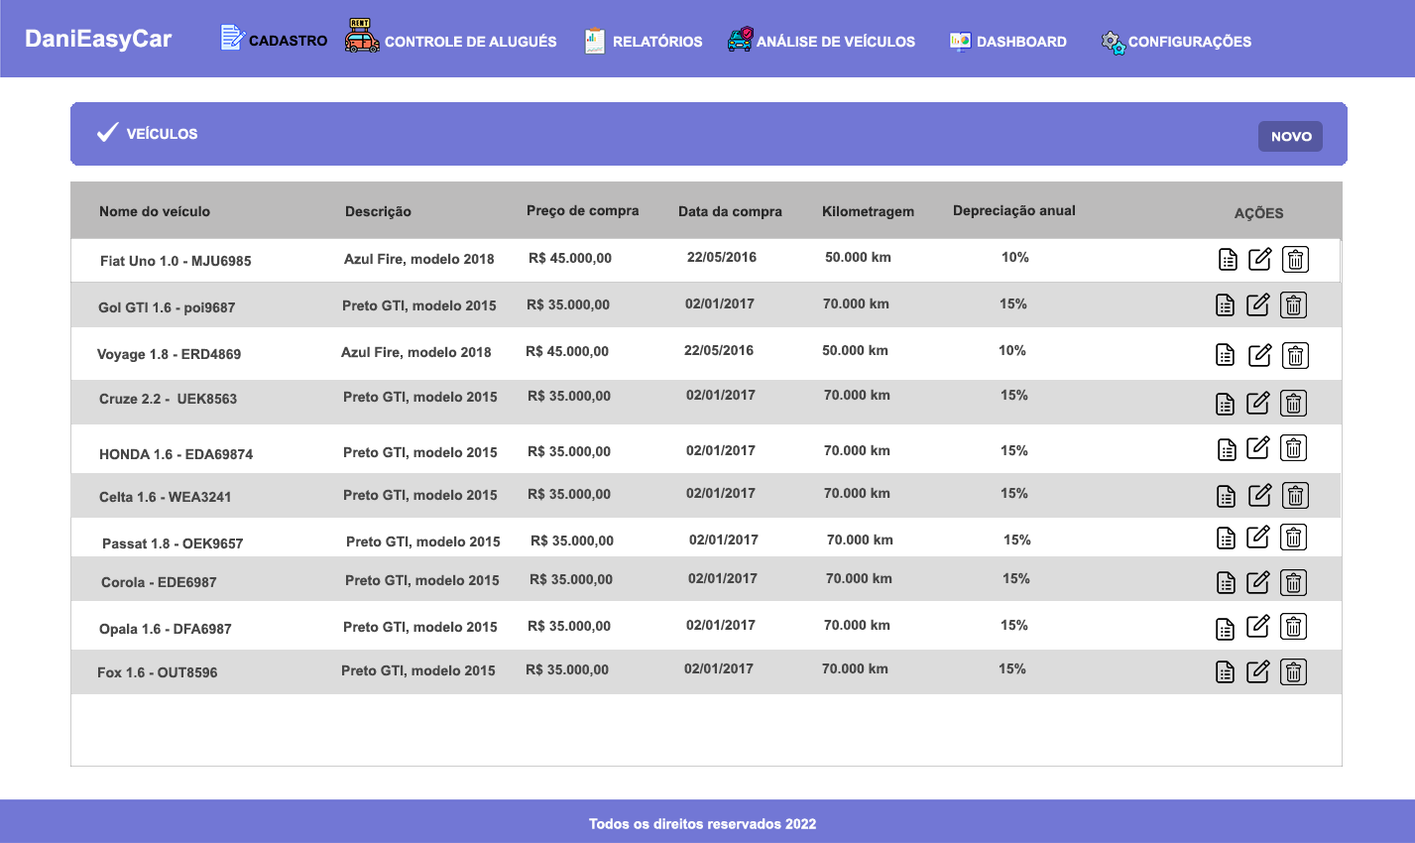
<style>
.page{position:relative;width:1415px;height:843px;background:#ffffff}
.page>*{position:absolute;margin:0}
.t1{font:23.8px "Arial-BoldMT";color:#fdfdfd}
.t2{font:13.9px "Arial-BoldMT";color:#010101}
.t3{font:13.9px "Arial-BoldMT";color:#fdfdfd}
.t4{font:13.9px "Arial-BoldMT";color:#fefefe}
.t5{font:12.1px "Arial-BoldMT";color:#fefefe;scale:1.15 1}
.t6{font:13.9px "Arial-BoldMT";color:#2a2a2a}
.t7{font:13.9px "Arial-BoldMT";color:#474747}
.t8{font:13.9px "Arial-BoldMT";color:#ffffff}
</style>
<div class="page">
<p class="t1" style="left:26px;top:29px;width:147px;height:24px">DaniEasyCar</p>
<p class="t2" style="left:249px;top:35px;width:78px;height:12px">CADASTRO</p>
<p class="t3" style="left:385px;top:34px;width:172px;height:14px">CONTROLE DE ALUGUÉS</p>
<p class="t3" style="left:614px;top:34px;width:89px;height:14px">RELATÓRIOS</p>
<p class="t3" style="left:757px;top:34px;width:158px;height:14px">ANÁLISE DE VEÍCULOS</p>
<p class="t3" style="left:978px;top:36px;width:89px;height:12px">DASHBOARD</p>
<p class="t3" style="left:1128px;top:34px;width:123px;height:16px">CONFIGURAÇÕES</p>
<p class="t4" style="left:126px;top:126px;width:71px;height:14px">VEÍCULOS</p>
<p class="t5" style="left:1272px;top:132px;width:40px;height:10px">NOVO</p>
<p class="t6" style="left:100px;top:205px;width:110px;height:12px">Nome do veículo</p>
<p class="t6" style="left:346px;top:205px;width:65px;height:14px">Descrição</p>
<p class="t6" style="left:527px;top:204px;width:113px;height:14px">Preço de compra</p>
<p class="t6" style="left:679px;top:205px;width:103px;height:14px">Data da compra</p>
<p class="t6" style="left:823px;top:205px;width:91px;height:14px">Kilometragem</p>
<p class="t6" style="left:954px;top:204px;width:121px;height:14px">Depreciação anual</p>
<p class="t7" style="left:1234px;top:205px;width:50px;height:16px">AÇÕES</p>
<p class="t7" style="left:101px;top:255px;width:151px;height:12px">Fiat Uno 1.0 - MJU6985</p>
<p class="t7" style="left:344px;top:253px;width:151px;height:14px">Azul Fire, modelo 2018</p>
<p class="t7" style="left:529px;top:252px;width:83px;height:14px">R$ 45.000,00</p>
<p class="t7" style="left:687px;top:251px;width:70px;height:12px">22/05/2016</p>
<p class="t7" style="left:825px;top:251px;width:66px;height:12px">50.000 km</p>
<p class="t7" style="left:1002px;top:251px;width:27px;height:12px">10%</p>
<p class="t7" style="left:98px;top:301px;width:137px;height:14px">Gol GTI 1.6 - poi9687</p>
<p class="t7" style="left:343px;top:299px;width:154px;height:14px">Preto GTI, modelo 2015</p>
<p class="t7" style="left:527px;top:298px;width:83px;height:14px">R$ 35.000,00</p>
<p class="t7" style="left:685px;top:297px;width:70px;height:12px">02/01/2017</p>
<p class="t7" style="left:823px;top:297px;width:66px;height:12px">70.000 km</p>
<p class="t7" style="left:1000px;top:297px;width:27px;height:12px">15%</p>
<p class="t7" style="left:96px;top:348px;width:145px;height:14px">Voyage 1.8 - ERD4869</p>
<p class="t7" style="left:341px;top:346px;width:151px;height:14px">Azul Fire, modelo 2018</p>
<p class="t7" style="left:526px;top:345px;width:83px;height:14px">R$ 45.000,00</p>
<p class="t7" style="left:684px;top:344px;width:70px;height:12px">22/05/2016</p>
<p class="t7" style="left:822px;top:344px;width:66px;height:12px">50.000 km</p>
<p class="t7" style="left:999px;top:344px;width:27px;height:12px">10%</p>
<p class="t7" style="left:528px;top:390px;width:83px;height:14px">R$ 35.000,00</p>
<p class="t7" style="left:686px;top:389px;width:70px;height:12px">02/01/2017</p>
<p class="t7" style="left:824px;top:389px;width:66px;height:12px">70.000 km</p>
<p class="t7" style="left:1001px;top:389px;width:27px;height:12px">15%</p>
<p class="t7" style="left:99px;top:393px;width:138px;height:12px">Cruze 2.2 -  UEK8563</p>
<p class="t7" style="left:344px;top:391px;width:154px;height:14px">Preto GTI, modelo 2015</p>
<p class="t7" style="left:100px;top:448px;width:153px;height:12px">HONDA 1.6 - EDA69874</p>
<p class="t7" style="left:344px;top:446px;width:154px;height:14px">Preto GTI, modelo 2015</p>
<p class="t7" style="left:528px;top:445px;width:83px;height:14px">R$ 35.000,00</p>
<p class="t7" style="left:686px;top:444px;width:70px;height:12px">02/01/2017</p>
<p class="t7" style="left:824px;top:444px;width:66px;height:12px">70.000 km</p>
<p class="t7" style="left:1001px;top:444px;width:27px;height:12px">15%</p>
<p class="t7" style="left:99px;top:491px;width:131px;height:12px">Celta 1.6 - WEA3241</p>
<p class="t7" style="left:344px;top:489px;width:154px;height:14px">Preto GTI, modelo 2015</p>
<p class="t7" style="left:528px;top:488px;width:83px;height:14px">R$ 35.000,00</p>
<p class="t7" style="left:686px;top:487px;width:70px;height:12px">02/01/2017</p>
<p class="t7" style="left:824px;top:487px;width:66px;height:12px">70.000 km</p>
<p class="t7" style="left:1001px;top:487px;width:27px;height:12px">15%</p>
<p class="t7" style="left:689px;top:533px;width:70px;height:12px">02/01/2017</p>
<p class="t7" style="left:827px;top:533px;width:66px;height:12px">70.000 km</p>
<p class="t7" style="left:1004px;top:533px;width:27px;height:12px">15%</p>
<p class="t7" style="left:103px;top:537px;width:140px;height:12px">Passat 1.8 - OEK9657</p>
<p class="t7" style="left:347px;top:535px;width:154px;height:14px">Preto GTI, modelo 2015</p>
<p class="t7" style="left:531px;top:534px;width:83px;height:14px">R$ 35.000,00</p>
<p class="t7" style="left:101px;top:576px;width:116px;height:12px">Corola - EDE6987</p>
<p class="t7" style="left:346px;top:574px;width:154px;height:14px">Preto GTI, modelo 2015</p>
<p class="t7" style="left:530px;top:573px;width:83px;height:14px">R$ 35.000,00</p>
<p class="t7" style="left:688px;top:572px;width:70px;height:12px">02/01/2017</p>
<p class="t7" style="left:826px;top:572px;width:66px;height:12px">70.000 km</p>
<p class="t7" style="left:1003px;top:572px;width:27px;height:12px">15%</p>
<p class="t7" style="left:99px;top:623px;width:133px;height:14px">Opala 1.6 - DFA6987</p>
<p class="t7" style="left:344px;top:621px;width:154px;height:14px">Preto GTI, modelo 2015</p>
<p class="t7" style="left:528px;top:620px;width:83px;height:14px">R$ 35.000,00</p>
<p class="t7" style="left:686px;top:619px;width:70px;height:12px">02/01/2017</p>
<p class="t7" style="left:824px;top:619px;width:66px;height:12px">70.000 km</p>
<p class="t7" style="left:1001px;top:619px;width:27px;height:12px">15%</p>
<p class="t7" style="left:342px;top:664px;width:154px;height:14px">Preto GTI, modelo 2015</p>
<p class="t7" style="left:526px;top:663px;width:83px;height:14px">R$ 35.000,00</p>
<p class="t7" style="left:684px;top:662px;width:70px;height:12px">02/01/2017</p>
<p class="t7" style="left:822px;top:662px;width:66px;height:12px">70.000 km</p>
<p class="t7" style="left:999px;top:662px;width:27px;height:12px">15%</p>
<p class="t7" style="left:98px;top:666px;width:119px;height:12px">Fox 1.6 - OUT8596</p>
<p class="t8" style="left:589px;top:818px;width:227px;height:11px">Todos os direitos reservados 2022</p>
</div>
